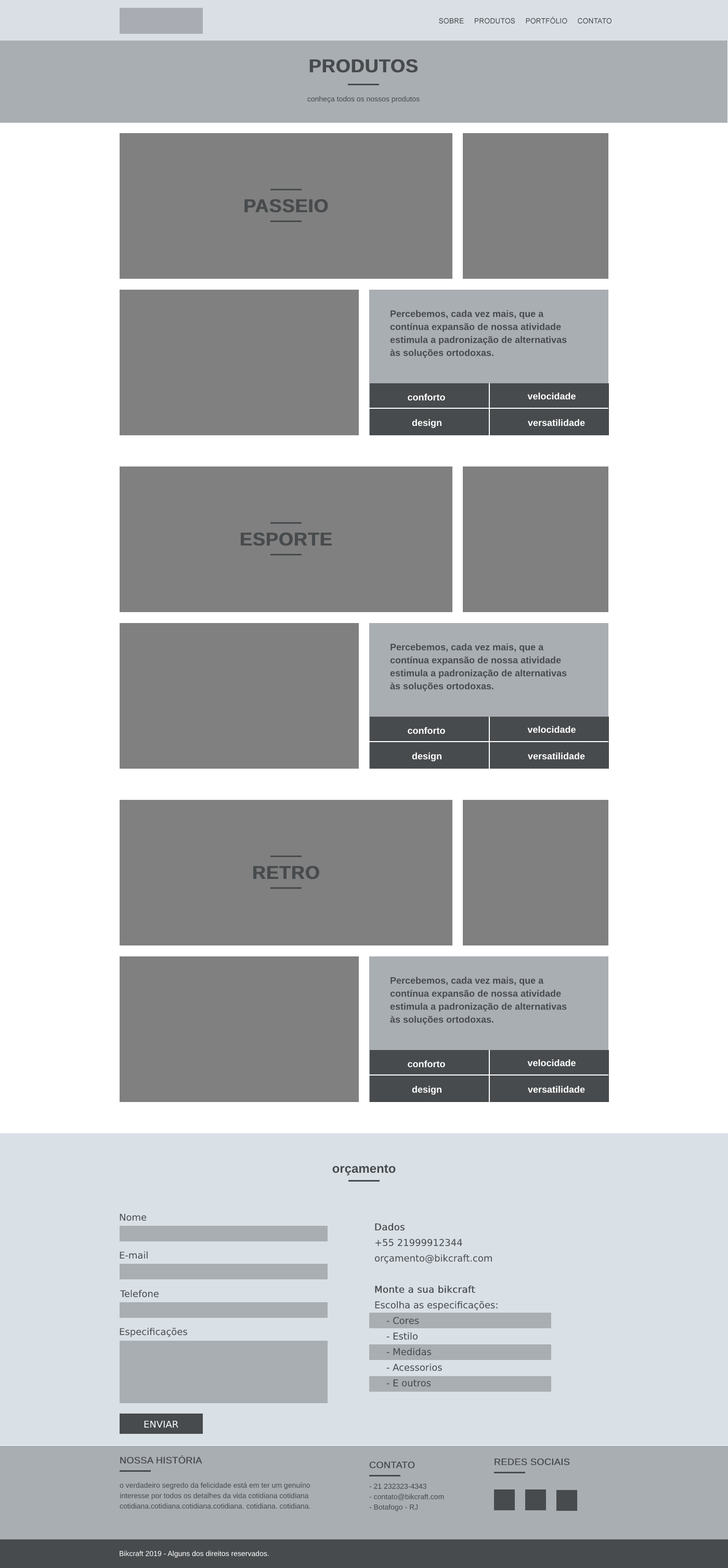
<style>
.page{position:relative;width:728px;height:1568px;background:#ffffff}
.page>*{position:absolute;margin:0}
.t1{font:7.3px "ArialMT";color:#484b4d;text-transform:uppercase}
.t2{font:18.7px "Arial-BoldMT";color:#484b4d;text-transform:uppercase;font-weight:bold}
.t3{font:7.3px "ArialMT";color:#484b4d}
.t4{font:9.4px/13px "Arial-BoldMT";color:#484b4d}
.t5{font:9.4px "Arial-BoldMT";color:#ffffff}
.t6{font:12.5px "Arial-BoldMT";color:#484b4d}
.t7{font:9.4px "DejaVuSans";color:#484b4d}
.t8{font:9.4px/15.6px "DejaVuSans";color:#484b4d}
.t9{font:9.4px/15.6px "DejaVuSans";color:#484b4d;font-weight:bold}
.t10{font:9.4px "DejaVuSans";color:#ffffff;text-transform:uppercase}
.t11{font:9.4px "ArialMT";color:#484b4d;font-weight:bold}
.t12{font:7.3px/10.4px "ArialMT";color:#484b4d}
.t13{font:7.3px "ArialMT";color:#ffffff}
</style>
<div class="page">
<p class="t1" style="left:439px;top:17px;width:173px;height:7px">Sobre     Produtos     PORTFÓLIO     Contato</p>
<p class="t2" style="left:309px;top:59px;width:109px;height:14px">produtos</p>
<p class="t3" style="left:307px;top:96px;width:113px;height:7px">conheça todos os nossos produtos</p>
<p class="t2" style="left:244px;top:199px;width:84px;height:14px">Passeio</p>
<p class="t4" style="left:390px;top:310px;width:177px;height:48px">Percebemos, cada vez mais, que a contínua expansão de nossa atividade estimula a padronização de alternativas às soluções ortodoxas.</p>
<p class="t5" style="left:408px;top:393px;width:37px;height:8px">conforto</p>
<p class="t5" style="left:527px;top:392px;width:49px;height:8px">velocidade</p>
<p class="t5" style="left:412px;top:419px;width:30px;height:9px">design</p>
<p class="t5" style="left:528px;top:419px;width:57px;height:7px">versatilidade</p>
<p class="t2" style="left:240px;top:532px;width:92px;height:14px">Esporte</p>
<p class="t4" style="left:390px;top:643px;width:177px;height:49px">Percebemos, cada vez mais, que a contínua expansão de nossa atividade estimula a padronização de alternativas às soluções ortodoxas.</p>
<p class="t5" style="left:527px;top:725px;width:49px;height:8px">velocidade</p>
<p class="t5" style="left:408px;top:727px;width:37px;height:7px">conforto</p>
<p class="t5" style="left:412px;top:752px;width:30px;height:9px">design</p>
<p class="t5" style="left:528px;top:752px;width:57px;height:8px">versatilidade</p>
<p class="t2" style="left:253px;top:865px;width:66px;height:14px">retro</p>
<p class="t4" style="left:390px;top:977px;width:177px;height:48px">Percebemos, cada vez mais, que a contínua expansão de nossa atividade estimula a padronização de alternativas às soluções ortodoxas.</p>
<p class="t5" style="left:408px;top:1060px;width:37px;height:8px">conforto</p>
<p class="t5" style="left:527px;top:1059px;width:49px;height:8px">velocidade</p>
<p class="t5" style="left:412px;top:1085px;width:30px;height:10px">design</p>
<p class="t5" style="left:528px;top:1085px;width:57px;height:8px">versatilidade</p>
<p class="t6" style="left:332px;top:1164px;width:64px;height:11px">orçamento</p>
<p class="t7" style="left:120px;top:1213px;width:27px;height:8px">Nome</p>
<p class="t8" style="left:374px;top:1223px;width:124px;height:163px"><span class="t9">Dados<br></span>+55 21999912344<br>orçamento@bikcraft.com<br><br><span class="t9">Monte a sua bikcraft<br></span>Escolha as especificações:<br>    - Cores<br>    - Estilo<br>    - Medidas<br>    - Acessorios<br>    - E outros</p>
<p class="t7" style="left:120px;top:1251px;width:28px;height:8px">E-mail</p>
<p class="t7" style="left:120px;top:1290px;width:39px;height:8px">Telefone</p>
<p class="t7" style="left:120px;top:1328px;width:67px;height:9px">Especificações</p>
<p class="t10" style="left:144px;top:1420px;width:34px;height:8px">Enviar</p>
<p class="t11" style="left:120px;top:1455px;width:82px;height:9px">NOSSA HISTÓRIA</p>
<p class="t11" style="left:369px;top:1461px;width:46px;height:8px">CONTATO</p>
<p class="t11" style="left:495px;top:1458px;width:75px;height:8px">REDES SOCIAIS</p>
<p class="t12" style="left:120px;top:1482px;width:190px;height:27px">o verdadeiro segredo da felicidade está em ter um genuíno interesse por todos os detalhes da vida cotidiana cotidiana  cotidiana.cotidiana.cotidiana.cotidiana. cotidiana. cotidiana.</p>
<p class="t12" style="left:369px;top:1483px;width:75px;height:28px">- 21 232323-4343<br>- contato@bikcraft.com<br>- Botafogo - RJ</p>
<p class="t13" style="left:120px;top:1550px;width:149px;height:8px">Bikcraft 2019 - Alguns dos direitos reservados.</p>
</div>
